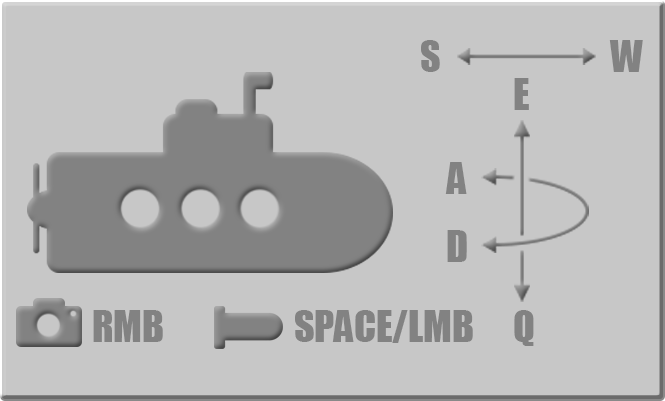
<style>
.page{position:relative;width:665px;height:401px;background:#c7c7c7}
.page>*{position:absolute;margin:0}
.t1{font:40px "Impact";color:#828282;text-transform:uppercase}
</style>
<div class="page">
<p class="t1" style="left:421px;top:40px;width:19px;height:32px">S</p>
<p class="t1" style="left:609px;top:40px;width:34px;height:32px">W</p>
<p class="t1" style="left:514px;top:78px;width:15px;height:32px">E</p>
<p class="t1" style="left:445px;top:162px;width:22px;height:32px">A</p>
<p class="t1" style="left:447px;top:230px;width:20px;height:32px">D</p>
<p class="t1" style="left:93px;top:310px;width:70px;height:32px">RMB</p>
<p class="t1" style="left:295px;top:310px;width:178px;height:33px">SPACE/LMB</p>
<p class="t1" style="left:514px;top:310px;width:20px;height:36px">Q</p>
</div>
